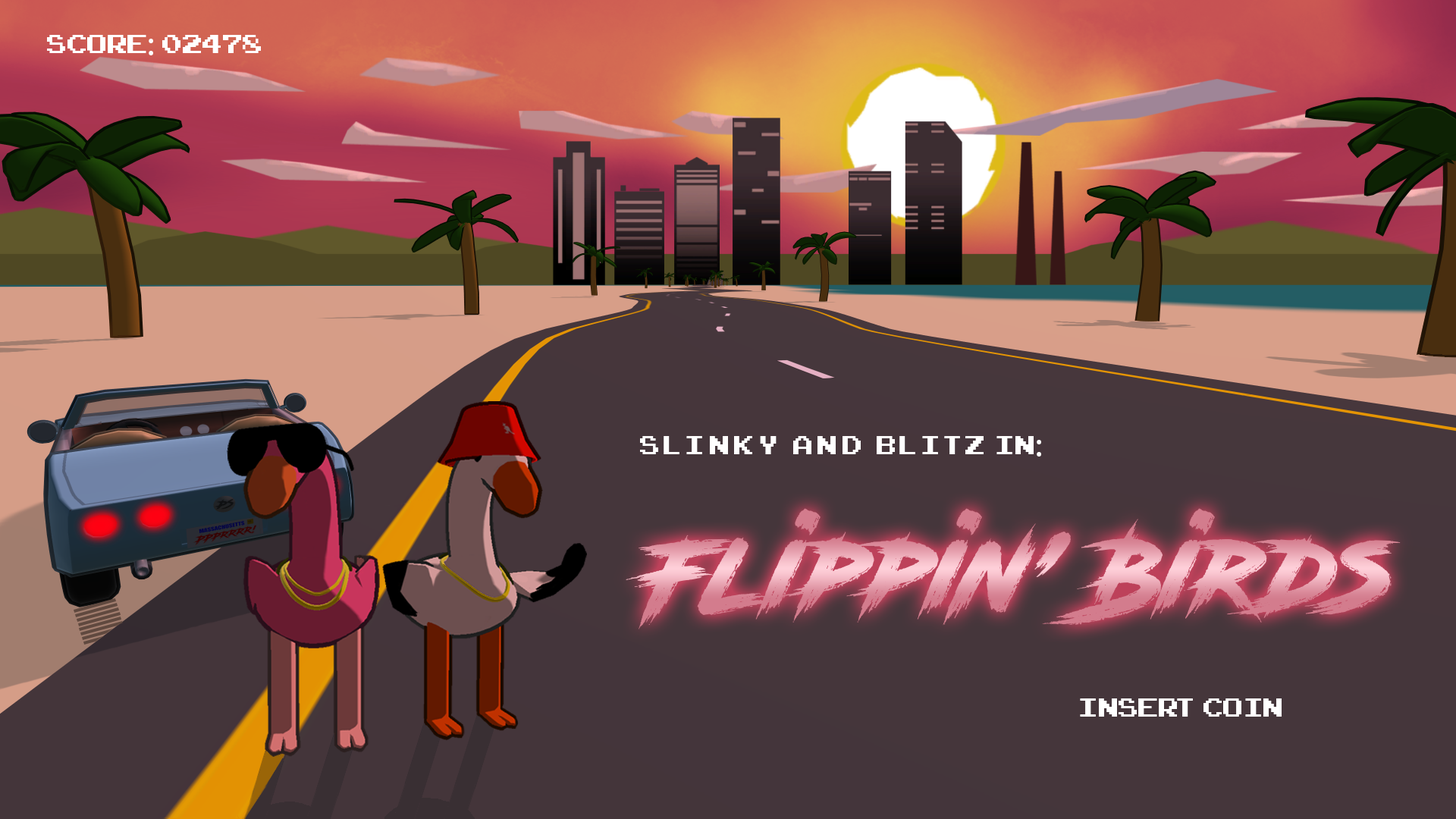
<style>
.page{position:relative;width:1456px;height:819px}
.page>*{position:absolute;margin:0}
.t1{font:36.4px "ArcadeClassic";color:#ffffff}
.t2{font:36.4px "MyriadPro-Regular";color:#ffffff}
.t3{font:103.3px "RoadRage"}
</style>
<div class="page">
<p class="t1" style="left:47px;top:35px;width:214px;height:20px">SCORE<span class="t2">: </span>02478</p>
<p class="t1" style="left:640px;top:436px;width:401px;height:21px">S li n k y   a n d   B li tz  in<span class="t2">:</span></p>
<p class="t3" style="left:626px;top:508px;width:775px;height:121px">Flippin’ Birds</p>
<p class="t1" style="left:1080px;top:698px;width:202px;height:19px">Insert Coin</p>
</div>
